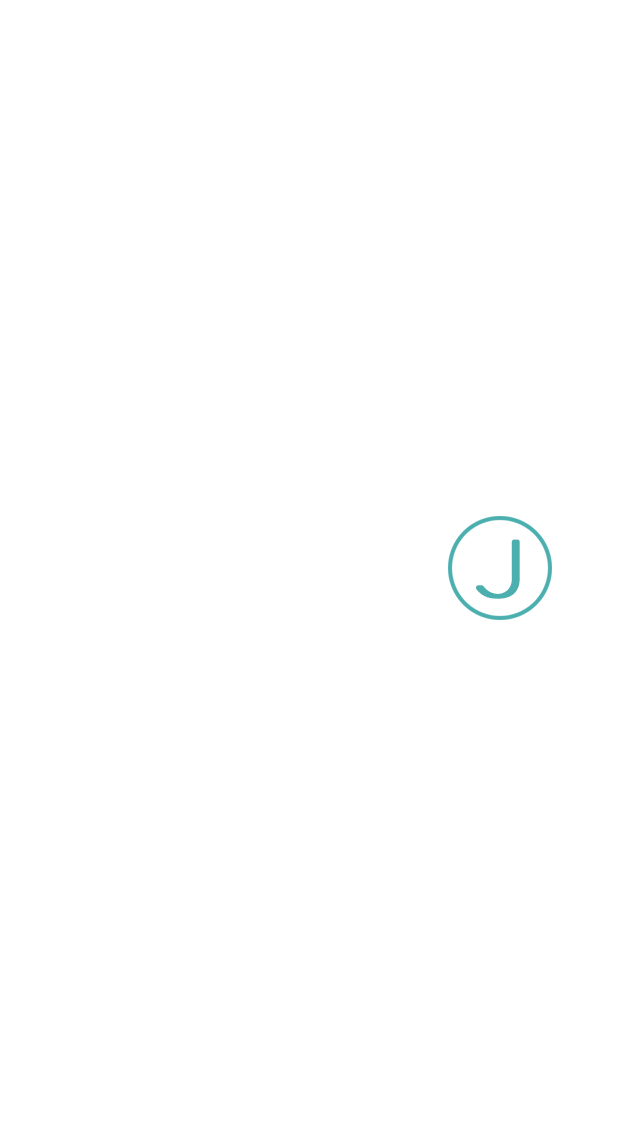
<style>
.page{position:relative;width:640px;height:1136px;background:#ffffff}
.page>*{position:absolute;margin:0}
.t1{font:81.6px "GothamRounded-Light";letter-spacing:0.025em;color:#4bafaf;font-weight:bold;scale:1.21 1}
</style>
<div class="page">
<p class="t1" style="left:476px;top:539px;width:44px;height:60px">J</p>
</div>
